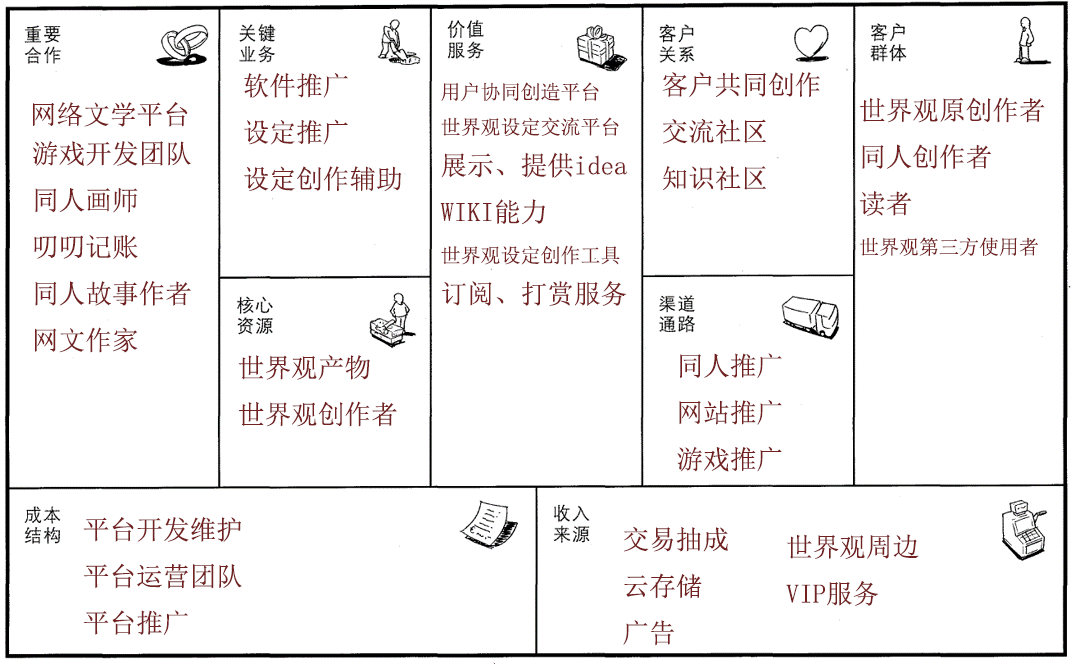
<style>
.page{position:relative;width:1071px;height:664px;background:#ffffff}
.page>*{position:absolute;margin:0}
.t1{font:26.7px "SimSun";color:#732021}
.t2{font:20px "SimSun";color:#732021}
</style>
<div class="page">
<p class="t1" style="left:244px;top:73px;width:158px;height:118px">软件推广<br>设定推广<br>设定创作辅助</p>
<p class="t1" style="left:662px;top:72px;width:158px;height:119px">客户共同创作<br>交流社区<br>知识社区</p>
<p class="t2" style="left:440px;top:82px;width:187px;height:224px">用户协同创造平台<br>世界观设定交流平台<br><span class="t1">展示、提供idea<br>WIKI能力<br></span>世界观设定创作工具<br><span class="t1">订阅、打赏服务</span></p>
<p class="t1" style="left:33px;top:102px;width:155px;height:25px">网络文学平台</p>
<p class="t1" style="left:859px;top:97px;width:186px;height:159px">世界观原创作者<br>同人创作者<br>读者<br><span class="t2">世界观第三方使用者</span></p>
<p class="t1" style="left:33px;top:141px;width:158px;height:212px">游戏开发团队<br>同人画师<br>叨叨记账<br>同人故事作者<br>网文作家</p>
<p class="t1" style="left:677px;top:353px;width:105px;height:119px">同人推广<br>网站推广<br>游戏推广</p>
<p class="t1" style="left:238px;top:355px;width:159px;height:72px">世界观产物<br>世界观创作者</p>
<p class="t1" style="left:83px;top:517px;width:159px;height:118px">平台开发维护<br>平台运营团队<br>平台推广</p>
<p class="t1" style="left:623px;top:526px;width:105px;height:120px">交易抽成<br>云存储<br>广告</p>
<p class="t1" style="left:786px;top:534px;width:133px;height:72px">世界观周边<br>VIP服务</p>
</div>
